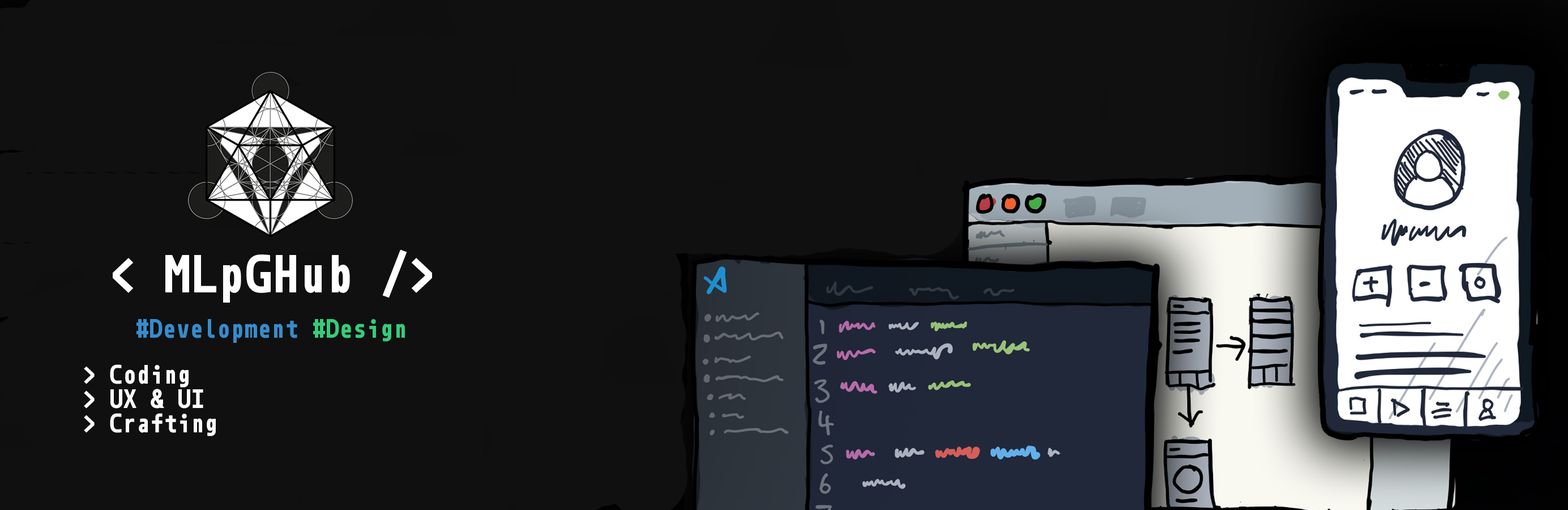
<style>
.page{position:relative;width:1568px;height:510px;background:#101010}
.page>*{position:absolute;margin:0}
.t1{font:40.8px "Monoid-Bold";color:#ffffff}
.t2{font:20.4px "Monoid-Bold";color:#378ccc}
.t3{font:20.4px "Monoid-Bold";color:#37cc7a}
.t4{font:20.4px "Monoid-Bold";color:#fcfcfc}
</style>
<div class="page">
<p class="t1" style="left:113px;top:249px;width:319px;height:53px">&lt; MLpGHub /&gt;</p>
<p class="t2" style="left:136px;top:319px;width:269px;height:24px">#Development <span class="t3">#Design</span></p>
<p class="t4" style="left:84px;top:364px;width:132px;height:72px">&gt; Coding<br>&gt; UX &amp; UI<br>&gt; Crafting</p>
</div>
